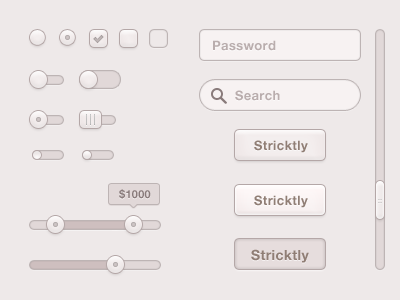
<style>
.page{position:relative;width:400px;height:300px;background:#eee9e9}
.page>*{position:absolute;margin:0}
.t1{font:13px "HelveticaNeue-Bold";letter-spacing:0.025em;color:#b9adad}
.t2{font:13px "HelveticaNeue-Bold";letter-spacing:0.025em;color:#907e75}
.t3{font:11px "HelveticaNeue-Bold";letter-spacing:0.025em;color:#897b7b}
.t4{font:14px "HelveticaNeue-Bold";letter-spacing:0.025em;color:#907e75}
</style>
<div class="page">
<p class="t1" style="left:213px;top:40px;width:63px;height:11px">Password</p>
<p class="t1" style="left:235px;top:90px;width:45px;height:11px">Search</p>
<p class="t2" style="left:254px;top:140px;width:54px;height:13px">Stricktly</p>
<p class="t3" style="left:119px;top:189px;width:32px;height:10px">$1000</p>
<p class="t2" style="left:254px;top:195px;width:54px;height:13px">Stricktly</p>
<p class="t4" style="left:251px;top:249px;width:58px;height:14px">Stricktly</p>
</div>
